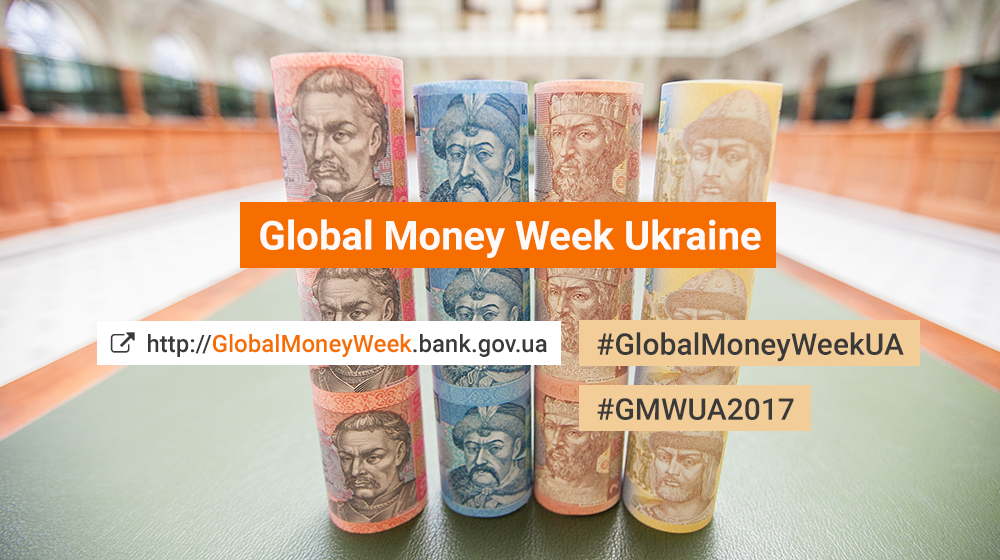
<style>
.page{position:relative;width:1000px;height:560px}
.page>*{position:absolute;margin:0}
.t1{font:40px "Roboto-Bold";color:#fffafa}
.t2{font:24px "Roboto-Medium";color:#f66e00}
.t3{font:24px "Roboto-Medium";color:#3a3a3a}
.t4{font:30px "Roboto-Medium";color:#3a3a3a}
</style>
<div class="page">
<p class="t1" style="left:260px;top:219px;width:501px;height:39px">Global Money Week Ukraine</p>
<p class="t2" style="left:148px;top:334px;width:399px;height:23px"><span class="t3">http://</span>GlobalMoneyWeek<span class="t3">.bank.gov.ua</span></p>
<p class="t4" style="left:597px;top:332px;width:307px;height:30px">#GlobalMoneyWeekUA</p>
<p class="t4" style="left:597px;top:398px;width:197px;height:22px">#GMWUA2017</p>
</div>
